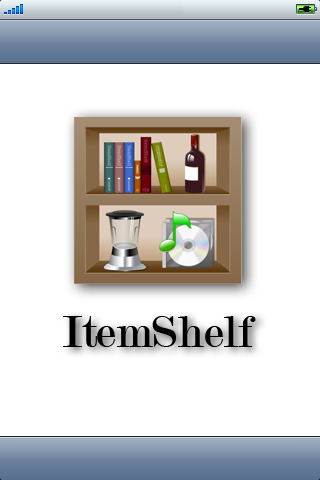
<style>
.page{position:relative;width:320px;height:480px;background:#ffffff}
.page>*{position:absolute;margin:0}
.t1{font:48px "Modern-Regular";color:#000000}
</style>
<div class="page">
<p class="t1" style="left:63px;top:316px;width:193px;height:31px">ItemShelf</p>
</div>
